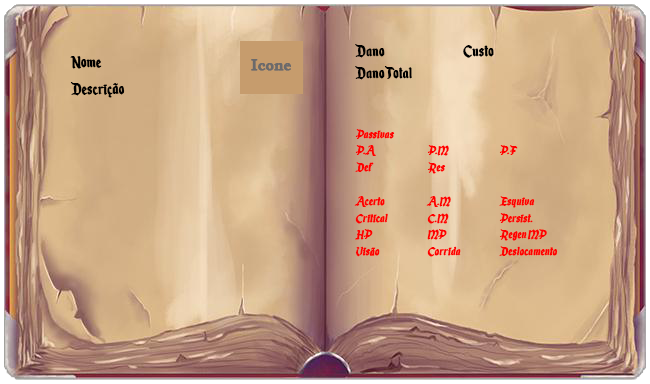
<style>
.page{position:relative;width:650px;height:384px}
.page>*{position:absolute;margin:0}
.t1{font:14px "EnchantedLand";color:#ff0000;font-weight:bold;font-style:italic}
.t2{font:18px "EnchantedLand";color:#000000;font-weight:bold}
.t3{font:16.1px "ImprintMT-Shadow";color:#6b6a6b;font-weight:bold}
.t4{font:16.1px "EnchantedLand";color:#c77716;font-weight:bold}
</style>
<div class="page">
<p class="t1" style="left:354px;top:44px;width:204px;height:213px"><span class="t2">Dano   Custo<br>Dano Total<br><br><br></span>Passivas<br>P.A  P.M  P.F<br>Def  Res<br>  <br>Acerto   A.M  Esquiva<br>Critical  C.M  Persist.<br>HP  MP  Regen MP<br>Visão  Corrida  Deslocamento</p>
<p class="t2" style="left:70px;top:56px;width:32px;height:13px">Nome</p>
<p class="t3" style="left:251px;top:59px;width:40px;height:12px"><span class="t4"><br></span>Icone</p>
<p class="t2" style="left:70px;top:82px;width:55px;height:16px">Descrição</p>
</div>
